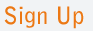
<style>
.page{position:relative;width:93px;height:31px;background:#f1f3f5}
.page>*{position:absolute;margin:0}
.t1{font:24px "BellGothicStd-Bold";color:#ec7814}
</style>
<div class="page">
<p class="t1" style="left:4px;top:6px;width:80px;height:23px">Sign Up</p>
</div>
